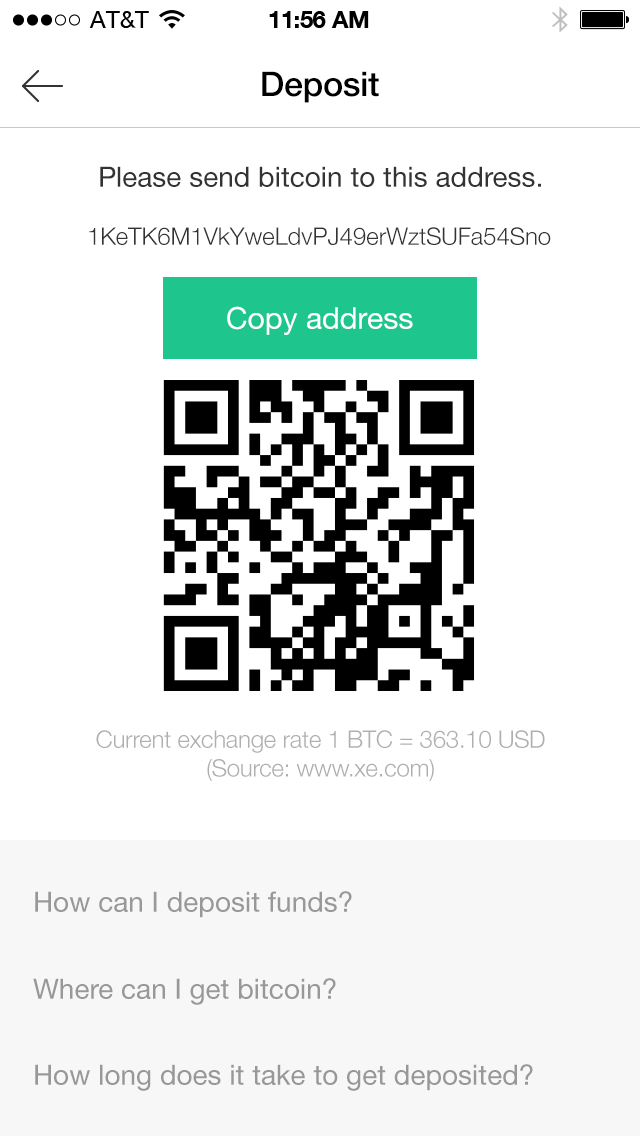
<style>
.page{position:relative;width:640px;height:1136px;background:#ffffff}
.page>*{position:absolute;margin:0}
.t1{font:34px "HelveticaNeue-Medium";letter-spacing:-0.01em;color:#000000}
.t2{font:28px "HelveticaNeue";color:#333333}
.t3{font:24px "HelveticaNeue-Light";color:#333333}
.t4{font:30px "HelveticaNeue";color:#ffffff}
.t5{font:24px "HelveticaNeue-Light";letter-spacing:-0.01em;color:#afafaf}
.t6{font:28px "HelveticaNeue";color:#989898}
</style>
<div class="page">
<p class="t1" style="left:262px;top:71px;width:117px;height:32px">Deposit</p>
<p class="t2" style="left:100px;top:166px;width:441px;height:21px">Please send bitcoin to this address.</p>
<p class="t3" style="left:89px;top:227px;width:462px;height:18px">1KeTK6M1VkYweLdvPJ49erWztSUFa54Sno</p>
<p class="t4" style="left:227px;top:306px;width:186px;height:29px">Copy address</p>
<p class="t5" style="left:96px;top:730px;width:449px;height:51px;text-align:center">Current exchange rate 1 BTC = 363.10 USD<br>(Source: www.xe.com)</p>
<p class="t6" style="left:35px;top:891px;width:317px;height:27px">How can I deposit funds?</p>
<p class="t6" style="left:33px;top:978px;width:303px;height:27px">Where can I get bitcoin?</p>
<p class="t6" style="left:35px;top:1064px;width:498px;height:27px">How long does it take to get deposited?</p>
</div>
